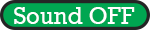
<style>
.page{position:relative;width:150px;height:30px;background:#00a651}
.page>*{position:absolute;margin:0}
.t1{font:24px "Rockwell";color:#ffffff}
</style>
<div class="page">
<p class="t1" style="left:14px;top:7px;width:121px;height:17px">Sound OFF</p>
</div>
